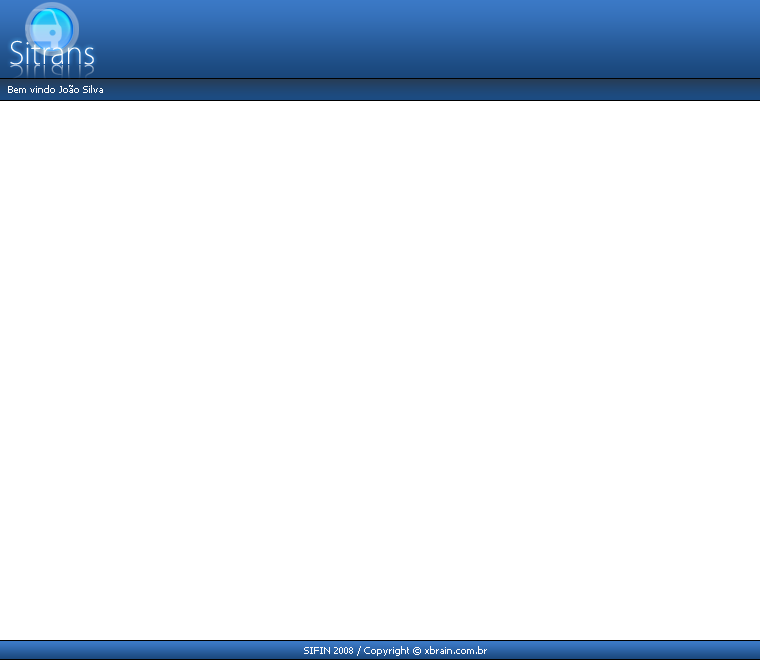
<style>
.page{position:relative;width:760px;height:660px;background:#ffffff}
.page>*{position:absolute;margin:0}
.t1{font:30px "KozGoPro-ExtraLight";color:#ffffff}
.t2{font:10px "Tahoma";color:#ffffff}
</style>
<div class="page">
<p class="t1" style="left:10px;top:40px;width:84px;height:25px">Sitrans</p>
<p class="t2" style="left:8px;top:85px;width:95px;height:8px">Bem vindo João Silva</p>
<p class="t2" style="left:304px;top:646px;width:183px;height:10px">SIFIN 2008 / Copyright © xbrain.com.br</p>
</div>
